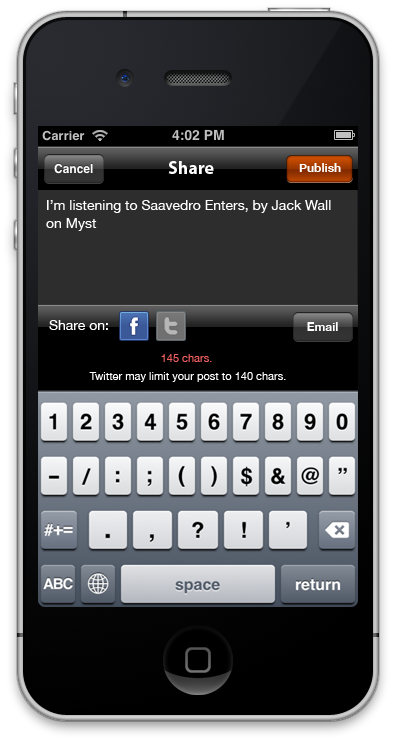
<style>
.page{position:relative;width:396px;height:744px}
.page>*{position:absolute;margin:0}
.t1{font:18px "MyriadPro-Bold";color:#ffffff}
.t2{font:12px "HelveticaNeue-Bold";color:#ffffff}
.t3{font:14px/18px "HelveticaNeue";color:#ffffff}
.t4{font:14px "HelveticaNeue";color:#ffffff}
.t5{font:11px/18px "HelveticaNeue";color:#ffffff}
.t6{font:11px/18px "HelveticaNeue";color:#ee5e5e}
</style>
<div class="page">
<p class="t1" style="left:168px;top:161px;width:46px;height:13px">Share</p>
<p class="t2" style="left:299px;top:163px;width:42px;height:9px">Publish</p>
<p class="t3" style="left:46px;top:200px;width:285px;height:31px">I’m listening to Saavedro Enters, by Jack Wall <br>on Myst</p>
<p class="t4" style="left:49px;top:320px;width:59px;height:10px">Share on:</p>
<p class="t2" style="left:307px;top:322px;width:31px;height:9px">Email</p>
<p class="t5" style="left:89px;top:354px;width:197px;height:28px;text-align:center"><span class="t6">145 chars. <br></span>Twitter may limit your post to 140 chars.</p>
</div>
